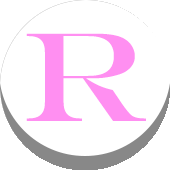
<style>
.page{position:relative;width:170px;height:170px;background:#ffffff}
.page>*{position:absolute;margin:0}
.t1{font:128px "EngraversMT";color:#ff8ff1}
</style>
<div class="page">
<p class="t1" style="left:26px;top:33px;width:120px;height:88px">R</p>
</div>
